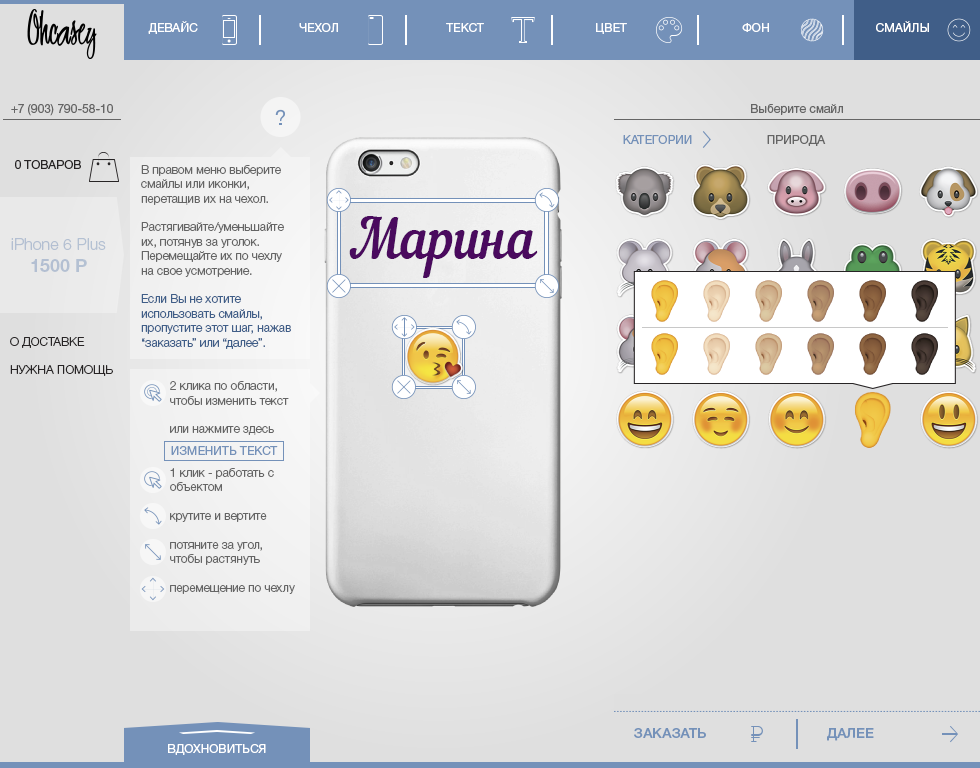
<style>
.page{position:relative;width:980px;height:768px;background:#dfdfdf}
.page>*{position:absolute;margin:0}
.t1{font:12px "HelveticaNeueCyr-Roman";color:#ffffff}
.t2{font:12px "HelveticaNeueCyr-Roman";color:#656565}
.t3{font:12px "HelveticaNeueCyr-Roman";color:#7491b9}
.t4{font:12px "HelveticaNeueCyr-Roman";color:#272425}
.t5{font:12px "HelveticaNeueCyr-Light";color:#656565}
.t6{font:12px "HelveticaNeueCyr-Light";color:#405e88}
.t7{font:54px "NautilusPompilius";color:#4a0a5e}
.t8{font:16px "HelveticaNeueCyr-Light";color:#b3bfd2}
.t9{font:18px "HelveticaNeueCyr-Bold";color:#b3bfd2}
.t10{font:12px "HelveticaNeueCyr-Light";color:#272425}
.t11{font:14px "HelveticaNeueCyr-Medium";color:#7491b9}
</style>
<div class="page">
<p class="t1" style="left:148px;top:21px;width:50px;height:13px">ДЕВАЙС</p>
<p class="t1" style="left:299px;top:23px;width:39px;height:10px">ЧЕХОЛ</p>
<p class="t1" style="left:446px;top:23px;width:38px;height:9px">ТЕКСТ</p>
<p class="t1" style="left:596px;top:23px;width:31px;height:11px">ЦВЕТ</p>
<p class="t1" style="left:742px;top:23px;width:27px;height:9px">ФОН</p>
<p class="t1" style="left:876px;top:21px;width:53px;height:12px">СМАЙЛЫ</p>
<p class="t2" style="left:11px;top:104px;width:102px;height:12px">+7 (903) 790-58-10</p>
<p class="t2" style="left:751px;top:104px;width:92px;height:11px">Выберите смайл</p>
<p class="t3" style="left:623px;top:135px;width:69px;height:9px">КАТЕГОРИИ</p>
<p class="t2" style="left:767px;top:135px;width:59px;height:11px">ПРИРОДА</p>
<p class="t4" style="left:15px;top:160px;width:66px;height:9px">0 ТОВАРОВ</p>
<p class="t5" style="left:141px;top:165px;width:150px;height:184px">В правом меню выберите смайлы или иконки, перетащив их на чехол.<br><br>Растягивайте/уменьшайте их, потянув за уголок. Перемещайте их по чехлу<br>на свое усмотрение.<br><br><span class="t6">Если Вы не хотите использовать смайлы, пропустите этот шаг, нажав “заказать” или “далее”.</span></p>
<p class="t7" style="left:349px;top:216px;width:189px;height:62px">Марина</p>
<p class="t8" style="left:11px;top:238px;width:95px;height:34px;text-align:center">iPhone 6 Plus<br><span class="t9">1500 Р</span></p>
<p class="t10" style="left:10px;top:337px;width:75px;height:11px">О ДОСТАВКЕ</p>
<p class="t10" style="left:10px;top:365px;width:103px;height:11px">НУЖНА ПОМОЩЬ</p>
<p class="t5" style="left:170px;top:381px;width:125px;height:213px">2 клика по области, чтобы изменить текст<br><br>или нажмите здесь<br><br><br>1 клик - работать с объектом<br><br>крутите и вертите<br><br>потяните за угол,<br>чтобы растянуть<br><br>перемещение по чехлу</p>
<p class="t3" style="left:171px;top:446px;width:107px;height:9px">ИЗМЕНИТЬ ТЕКСТ</p>
<p class="t11" style="left:634px;top:728px;width:72px;height:10px">ЗАКАЗАТЬ</p>
<p class="t11" style="left:827px;top:728px;width:47px;height:13px">ДАЛЕЕ</p>
<p class="t1" style="left:168px;top:744px;width:98px;height:11px">ВДОХНОВИТЬСЯ</p>
</div>
